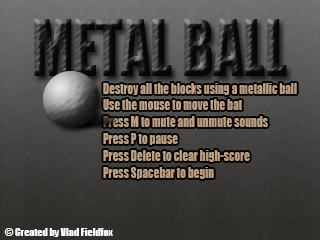
<style>
.page{position:relative;width:320px;height:240px}
.page>*{position:absolute;margin:0}
.t1{font:72px "Impact";scale:0.8 1}
.t2{font:14px "Impact";color:#bc9f82;scale:0.8 1}
.t3{font:10px "Impact";color:#ffffff}
.t4{font:11px "ArialMT";color:#ffffff}
</style>
<div class="page">
<p class="t1" style="left:34px;top:19px;width:253px;height:57px">METAL BALL</p>
<p class="t2" style="left:103px;top:83px;width:194px;height:96px">Destroy all the blocks using a metallic ball<br>Use the mouse to move the bat<br>Press M to mute and unmute sounds<br>Press P to pause<br>Press Delete to clear high-score<br>Press Spacebar to begin</p>
<p class="t3" style="left:4px;top:228px;width:109px;height:9px"><span class="t4">© </span>Created by Vlad Fieldfox</p>
</div>
